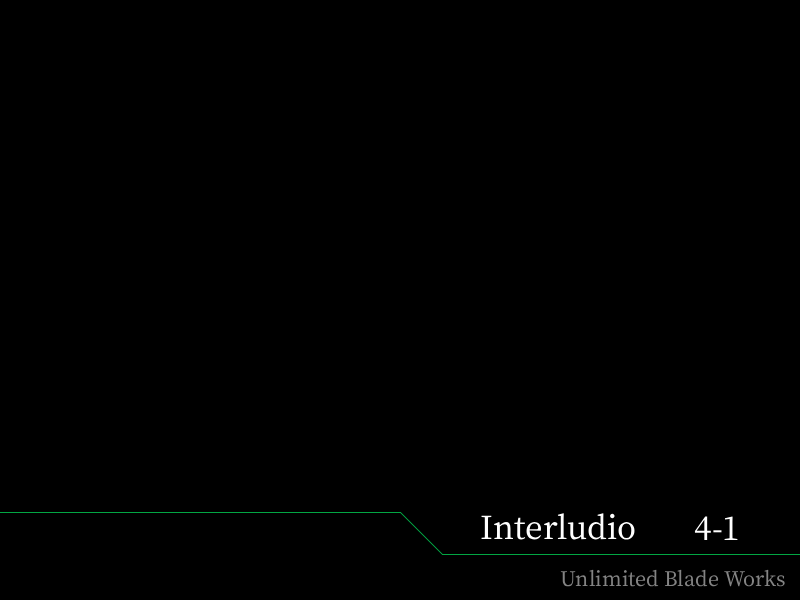
<style>
.page{position:relative;width:800px;height:600px;background:#000000}
.page>*{position:absolute;margin:0}
.t1{font:38px "OfficialFateFont-Medium";color:#ffffff}
.t2{font:24px "OfficialFateFont-Medium";color:#838383}
</style>
<div class="page">
<p class="t1" style="left:481px;top:513px;width:154px;height:27px">Interludio</p>
<p class="t1" style="left:694px;top:516px;width:44px;height:24px">4-1</p>
<p class="t2" style="left:560px;top:569px;width:225px;height:18px">Unlimited Blade Works</p>
</div>
